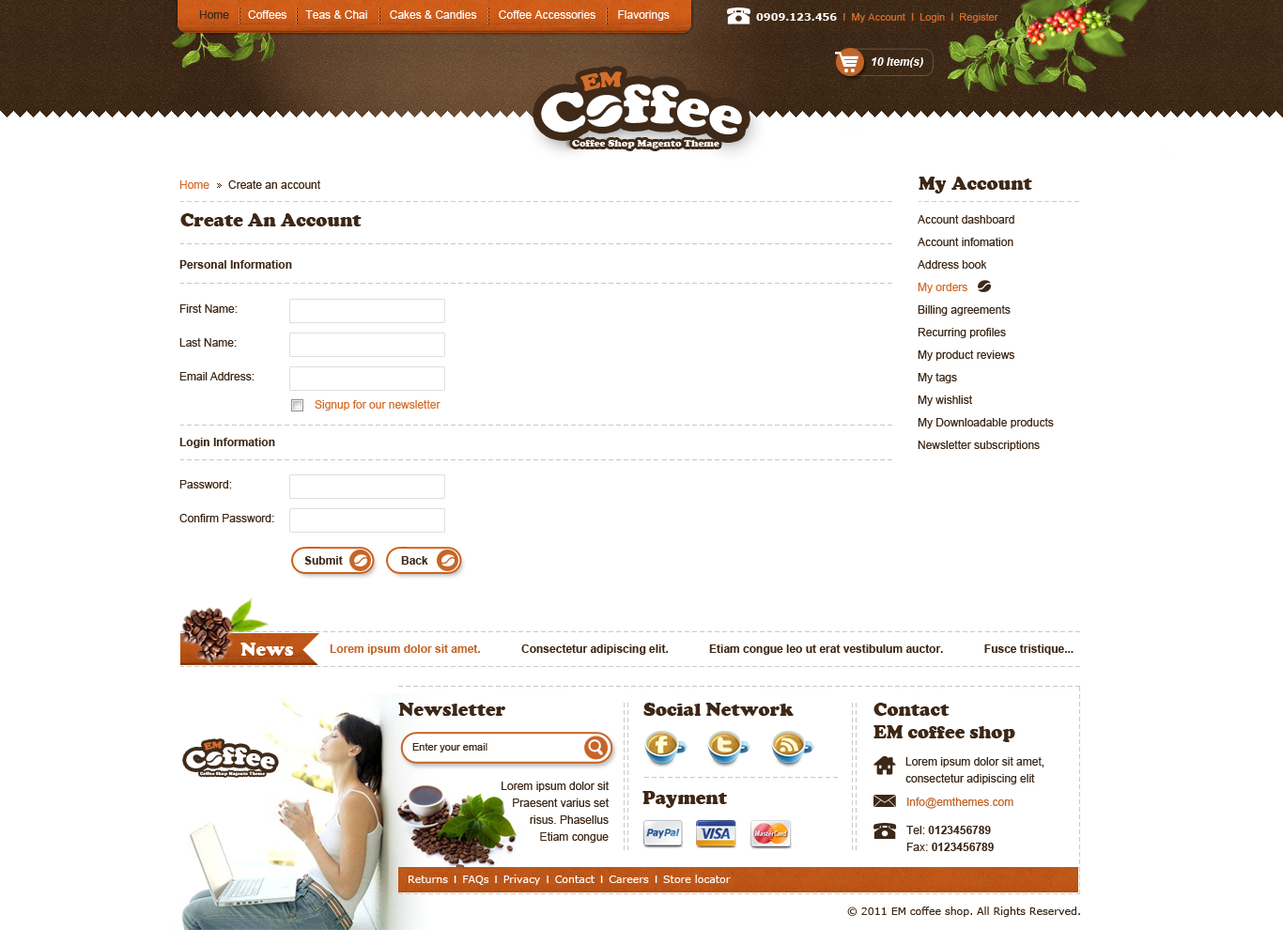
<style>
.page{position:relative;width:1283px;height:930px;background:#ffffff}
.page>*{position:absolute;margin:0}
.t1{font:11.3px "ArialMT";color:#fefefe}
.t2{font:11.3px "ArialMT";color:#3d2817}
.t3{font:10.3px "ArialMT";color:#d56d2b}
.t4{font:10.3px "Verdana-Bold";color:#ffffff}
.t5{font:11.3px "Arial-BoldItalicMT";color:#ffffff}
.t6{font:11.3px "ArialMT";color:#d56d2b}
.t7{font:18.8px "CooperBlack";color:#3d2817}
.t8{font:11.3px/22.5px "ArialMT";color:#3d2817}
.t9{font:11.3px/22.5px "ArialMT";color:#d56d2b}
.t10{font:11.3px "Arial-BoldMT";color:#3d2817}
.t11{font:11.3px/33.8px "ArialMT";color:#3d2817}
.t12{font:11.3px/28.2px "ArialMT";color:#d56d2b}
.t13{font:18.8px "CooperBlack";color:#ffffff}
.t14{font:11.3px "Arial-BoldMT";color:#c26529}
.t15{font:18.8px/22.5px "CooperBlack";color:#3d2817}
.t16{font:10.3px "ArialMT";color:#3d2817}
.t17{font:11.3px/16.9px "ArialMT";color:#3d2817}
.t18{font:11.3px/28.2px "ArialMT";color:#c26529}
.t19{font:11.3px/28.2px "ArialMT";color:#3d2817}
.t20{font:11.3px/28.2px "Arial-BoldMT";color:#3d2817}
.t21{font:11.3px/16.9px "Arial-BoldMT";color:#3d2817}
.t22{font:10.3px "Verdana";color:#ffffff}
.t23{font:10.3px "ArialMT";color:#ffffff}
.t24{font:10.3px "Verdana";color:#3d2817}
</style>
<div class="page">
<p class="t1" style="left:199px;top:10px;width:471px;height:11px"><span class="t2">Home</span>      Coffees      Teas &amp; Chai       Cakes &amp; Candies       Coffee Accessories       Flavorings</p>
<p class="t3" style="left:756px;top:13px;width:242px;height:10px"><span class="t4">0909.123.456</span>  I  My Account  I  Login  I  Register</p>
<p class="t5" style="left:871px;top:57px;width:52px;height:11px">10 Item(s)</p>
<p class="t2" style="left:179px;top:180px;width:141px;height:9px"><span class="t6">Home</span>      Create an account</p>
<p class="t7" style="left:918px;top:177px;width:114px;height:16px">My Account</p>
<p class="t7" style="left:180px;top:213px;width:182px;height:13px">Create An Account</p>
<p class="t8" style="left:917px;top:215px;width:137px;height:236px">Account dashboard<br>Account infomation<br>Address book<br><span class="t9">My orders<br></span>Billing agreements<br>Recurring profiles<br>My product reviews<br>My tags<br>My wishlist<br>My Downloadable products<br>Newsletter subscriptions</p>
<p class="t10" style="left:179px;top:260px;width:113px;height:9px">Personal Information</p>
<p class="t11" style="left:179px;top:304px;width:261px;height:106px">First Name:<br>Last Name:<br>Email Address:<br>    <span class="t12">Signup for our newsletter</span></p>
<p class="t10" style="left:179px;top:438px;width:96px;height:10px">Login Information</p>
<p class="t11" style="left:179px;top:480px;width:95px;height:42px">Password:<br>Confirm Password:</p>
<p class="t10" style="left:304px;top:556px;width:39px;height:8px">Submit</p>
<p class="t10" style="left:401px;top:556px;width:27px;height:8px">Back</p>
<p class="t13" style="left:240px;top:642px;width:53px;height:13px">News</p>
<p class="t10" style="left:330px;top:644px;width:743px;height:10px"><span class="t14">Lorem ipsum dolor sit amet.</span>             Consectetur adipiscing elit.             Etiam congue leo ut erat vestibulum auctor.             Fusce tristique...</p>
<p class="t7" style="left:398px;top:702px;width:107px;height:14px">Newsletter</p>
<p class="t7" style="left:643px;top:702px;width:150px;height:14px">Social Network</p>
<p class="t15" style="left:873px;top:702px;width:142px;height:40px">Contact<br>EM coffee shop</p>
<p class="t16" style="left:412px;top:743px;width:75px;height:9px">Enter your email</p>
<p class="t17" style="left:905px;top:757px;width:139px;height:27px">Lorem ipsum dolor sit amet, <br>consectetur adipiscing elit</p>
<p class="t17" style="left:501px;top:781px;width:107px;height:61px;text-align:right">Lorem ipsum dolor sit<br>Praesent varius set<br>risus. Phasellus<br>Etiam congue</p>
<p class="t7" style="left:642px;top:791px;width:85px;height:17px">Payment</p>
<p class="t18" style="left:906px;top:797px;width:107px;height:54px">Info@emthemes.com<br><span class="t19">Tel: </span><span class="t20">0123456789<br></span><span class="t17">Fax: </span><span class="t21">0123456789</span></p>
<p class="t22" style="left:408px;top:874px;width:323px;height:11px">Returns<span class="t23">  I  </span>FAQs<span class="t23">  I  </span>Privacy<span class="t23">  I  </span>Contact<span class="t23">  I  </span>Careers<span class="t23">  I  </span>Store locator</p>
<p class="t24" style="left:847px;top:906px;width:233px;height:10px">© 2011 EM coffee shop. All Rights Reserved.</p>
</div>
